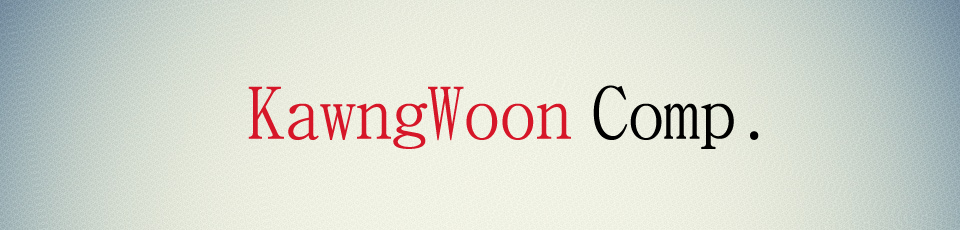
<style>
.page{position:relative;width:960px;height:230px}
.page>*{position:absolute;margin:0}
.t1{font:72px "BatangChe";color:#d61628}
.t2{font:72px "BatangChe";color:#000000}
</style>
<div class="page">
<p class="t1" style="left:248px;top:85px;width:511px;height:64px">KawngWoon <span class="t2">Comp.</span></p>
</div>
